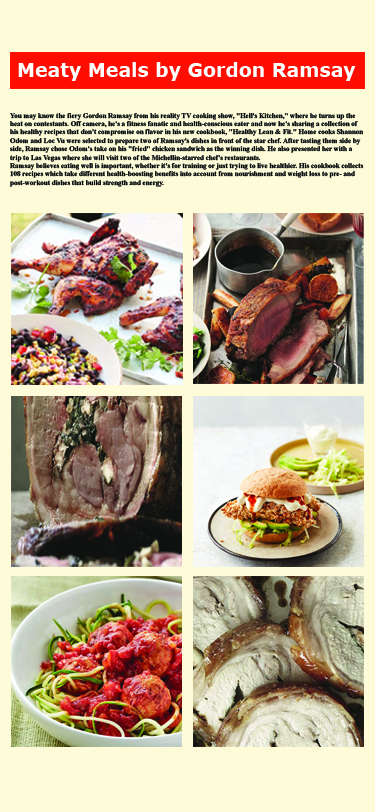
<style>
.page{position:relative;width:375px;height:812px;background:#fefbd8}
.page>*{position:absolute;margin:0}
.t1{font:19px "Verdana-Bold";color:#ffffff}
.t2{font:7px "TimesNewRomanPS-BoldMT";color:#060808}
</style>
<div class="page">
<p class="t1" style="left:18px;top:62px;width:338px;height:19px">Meaty Meals by Gordon Ramsay</p>
<p class="t2" style="left:10px;top:113px;width:354px;height:74px">You may know the fiery Gordon Ramsay from his reality TV cooking show, "Hell's Kitchen," where he turns up the heat on contestants. Off camera, he's a fitness fanatic and health-conscious eater and now he's sharing a collection of his healthy recipes that don't compromise on flavor in his new cookbook, "Healthy Lean &amp; Fit." Home cooks Shannon Odom and Loc Vu were selected to prepare two of Ramsay's dishes in front of the star chef. After tasting them side by side, Ramsay chose Odom's take on his "fried" chicken sandwich as the winning dish. He also presented her with a trip to Las Vegas where she will visit two of the Michellin-starred chef's restaurants.<br>Ramsay believes eating well is important, whether it's for training or just trying to live healthier. His cookbook collects 108 recipes which take different health-boosting benefits into account from nourishment and weight loss to pre- and post-workout dishes that build strength and energy.</p>
</div>
